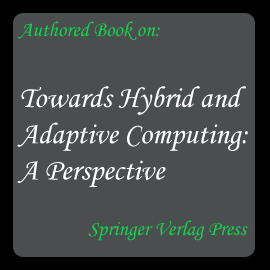
<style>
.page{position:relative;width:270px;height:270px;background:#4b4e4f}
.page>*{position:absolute;margin:0}
.t1{font:21px "MonotypeCorsiva";color:#15d04e}
.t2{font:30.2px "MonotypeCorsiva";color:#ffffff}
</style>
<div class="page">
<p class="t1" style="left:18px;top:21px;width:142px;height:19px">Authored Book on:</p>
<p class="t2" style="left:17px;top:86px;width:231px;height:101px">Towards Hybrid and <br>Adaptive Computing: <br>A Perspective</p>
<p class="t1" style="left:88px;top:220px;width:160px;height:21px">Springer Verlag Press</p>
</div>
